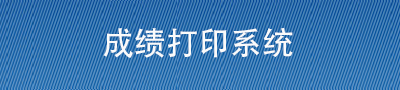
<style>
.page{position:relative;width:400px;height:90px}
.page>*{position:absolute;margin:0}
.t1{font:32px "AdobeHeitiStd-Regular";color:#fafafa}
</style>
<div class="page">
<p class="t1" style="left:103px;top:27px;width:190px;height:31px">成绩打印系统</p>
</div>
